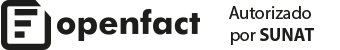
<style>
.page{position:relative;width:340px;height:50px;background:#ffffff}
.page>*{position:absolute;margin:0}
.t1{font:18px "MyriadPro-Regular";color:#1d1d1b}
.t2{font:18px "MyriadPro-Bold";color:#1d1d1b}
</style>
<div class="page">
<p class="t1" style="left:229px;top:6px;width:85px;height:39px;text-align:center">Autorizado <br>por <span class="t2">SUNAT</span></p>
</div>
